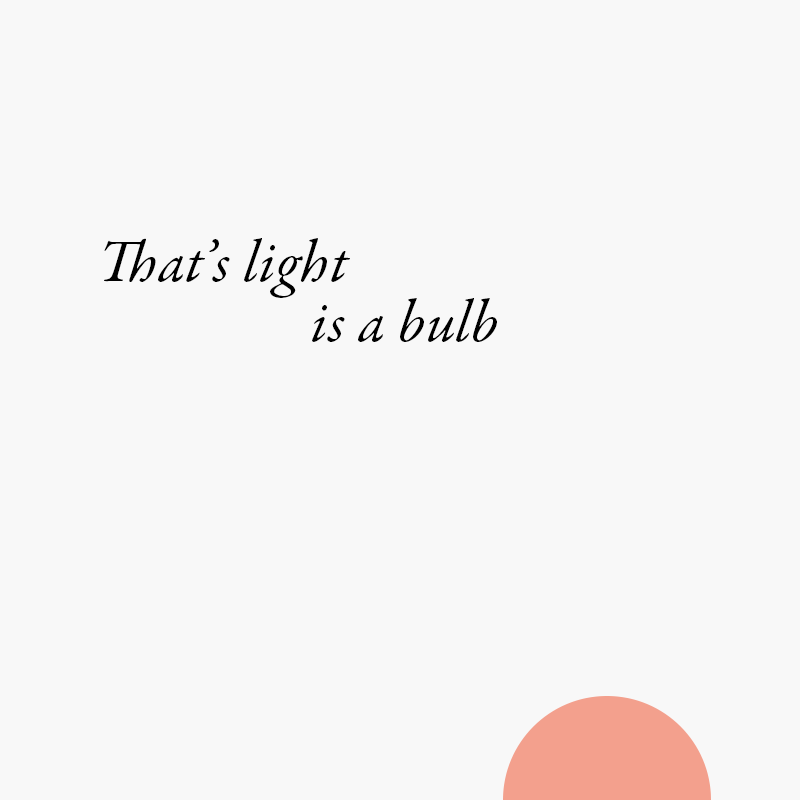
<style>
.page{position:relative;width:800px;height:800px;background:#f8f8f8}
.page>*{position:absolute;margin:0}
.t1{font:60px/60px "GaramondPremrPro-It";letter-spacing:0.01em;color:#000000}
</style>
<div class="page">
<p class="t1" style="left:104px;top:238px;width:393px;height:104px">That’s light<br>                 is a bulb</p>
</div>
